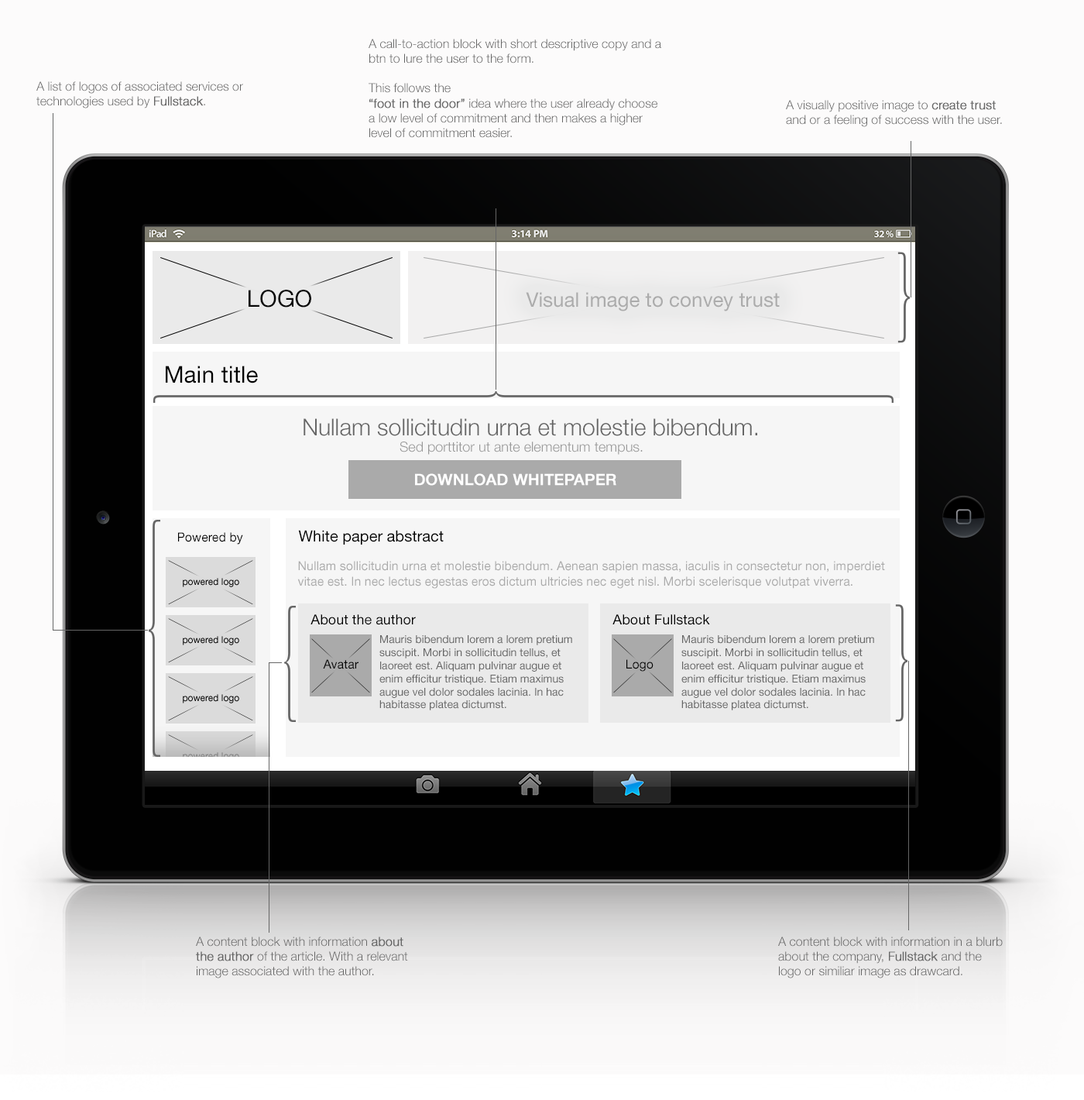
<style>
.page{position:relative;width:1084px;height:1100px;background:#fcfbfb}
.page>*{position:absolute;margin:0}
.t1{font:12.4px "HelveticaNeueLTStd-Lt";color:#666666}
.t2{font:12.4px "HelveticaNeueLTStd-Lt";color:#666666;font-weight:bold}
.t3{font:23.2px "HelveticaNeueLTStd-Roman";color:#000000}
.t4{font:20.1px "HelveticaNeueLTStd-Roman";color:#aaaaaa}
.t5{font:23.2px "HelveticaNeueLTStd-Lt";color:#666666}
.t6{font:13.9px "HelveticaNeueLTStd-Lt";color:#999999}
.t7{font:15.5px "HelveticaNeueLTStd-Md";color:#ffffff;font-weight:bold}
.t8{font:12.4px "HelveticaNeueLTStd-Roman";color:#000000}
.t9{font:15.5px "HelveticaNeueLTStd-Roman";color:#000000}
.t10{font:12.4px "HelveticaNeueLTStd-Roman";color:#aaaaaa}
.t11{font:13.9px "HelveticaNeueLTStd-Roman";color:#000000}
.t12{font:10.8px "HelveticaNeueLTStd-Roman";color:#666666}
</style>
<div class="page">
<p class="t1" style="left:369px;top:39px;width:292px;height:99px">A call-to-action block with short descriptive copy and a btn to lure the user to the form.<br><br>This follows the<br><span class="t2">“foot in the door”</span> idea where the user already choose a low level of commitment and then makes a higher level of commitment easier.</p>
<p class="t1" style="left:36px;top:81px;width:207px;height:27px">A list of logos of associated services or technologies used by <span class="t2">Fullstack</span>.</p>
<p class="t1" style="left:786px;top:100px;width:216px;height:27px">A visually positive image to <span class="t2">create trust </span>and or a feeling of success with the user.</p>
<p class="t3" style="left:249px;top:290px;width:62px;height:17px">LOGO</p>
<p class="t4" style="left:526px;top:292px;width:254px;height:19px">Visual image to convey trust</p>
<p class="t3" style="left:166px;top:366px;width:92px;height:17px">Main title</p>
<p class="t5" style="left:304px;top:418px;width:453px;height:18px">Nullam sollicitudin urna et molestie bibendum.</p>
<p class="t6" style="left:400px;top:441px;width:243px;height:14px">Sed porttitor ut ante elementum tempus.</p>
<p class="t7" style="left:415px;top:473px;width:201px;height:13px">DOWNLOAD WHITEPAPER</p>
<p class="t8" style="left:178px;top:532px;width:65px;height:12px">Powered by</p>
<p class="t9" style="left:298px;top:530px;width:146px;height:14px">White paper abstract</p>
<p class="t10" style="left:297px;top:561px;width:588px;height:28px">Nullam sollicitudin urna et molestie bibendum. Aenean sapien massa, iaculis in consectetur non, imperdiet vitae est. In nec lectus egestas eros dictum ultricies nec eget nisl. Morbi scelerisque volutpat viverra.</p>
<p class="t11" style="left:311px;top:614px;width:105px;height:11px">About the author</p>
<p class="t11" style="left:613px;top:614px;width:97px;height:11px">About Fullstack</p>
<p class="t12" style="left:379px;top:635px;width:193px;height:75px">Mauris bibendum lorem a lorem pretium suscipit. Morbi in sollicitudin tellus, et laoreet est. Aliquam pulvinar augue et enim efficitur tristique. Etiam maximus augue vel dolor sodales lacinia. In hac habitasse platea dictumst.</p>
<p class="t12" style="left:682px;top:635px;width:192px;height:75px">Mauris bibendum lorem a lorem pretium suscipit. Morbi in sollicitudin tellus, et laoreet est. Aliquam pulvinar augue et enim efficitur tristique. Etiam maximus augue vel dolor sodales lacinia. In hac habitasse platea dictumst.</p>
<p class="t8" style="left:323px;top:659px;width:36px;height:10px">Avatar</p>
<p class="t8" style="left:627px;top:659px;width:27px;height:12px">Logo</p>
<p class="t1" style="left:196px;top:936px;width:212px;height:42px">A content block with information <span class="t2">about the author</span> of the article. With a relevant image associated with the author.</p>
<p class="t1" style="left:778px;top:936px;width:225px;height:42px">A content block with information in a blurb about the company, <span class="t2">Fullstack </span>and the logo or similiar image as drawcard.</p>
</div>
